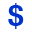
<style>
.page{position:relative;width:32px;height:32px;background:#ffffff}
.page>*{position:absolute;margin:0}
.t1{font:30px "Helvetica-Bold";letter-spacing:0.105em;color:#0033cc}
</style>
<div class="page">
<p class="t1" style="left:8px;top:3px;width:16px;height:26px">$</p>
</div>
